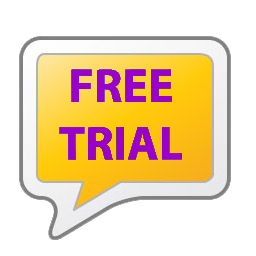
<style>
.page{position:relative;width:256px;height:256px;background:#ffffff}
.page>*{position:absolute;margin:0}
.t1{font:48px "MyriadPro-Bold";color:#9900cc}
</style>
<div class="page">
<p class="t1" style="left:59px;top:69px;width:123px;height:91px;text-align:center">FREE<br>TRIAL</p>
</div>
